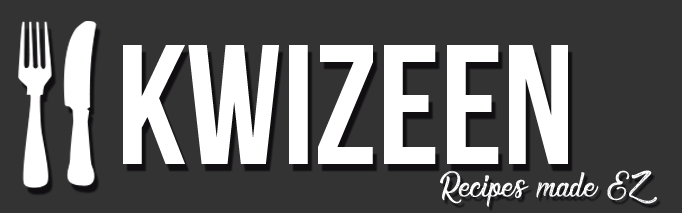
<style>
.page{position:relative;width:682px;height:213px;background:#333333}
.page>*{position:absolute;margin:0}
.t1{font:170px "BebasNeue";color:#ffffff}
.t2{font:71.9px "Elegant-and-Sensational";color:#ffffff}
</style>
<div class="page">
<p class="t1" style="left:123px;top:45px;width:445px;height:119px">kwizeen</p>
<p class="t2" style="left:440px;top:170px;width:217px;height:37px">Recipes made EZ</p>
</div>
